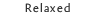
<style>
.page{position:relative;width:96px;height:16px;background:#ffffff}
.page>*{position:absolute;margin:0}
.t1{font:12px "Amira-Light";letter-spacing:0.1em;color:#333333}
</style>
<div class="page">
<p class="t1" style="left:25px;top:3px;width:45px;height:10px">Relaxed</p>
</div>
